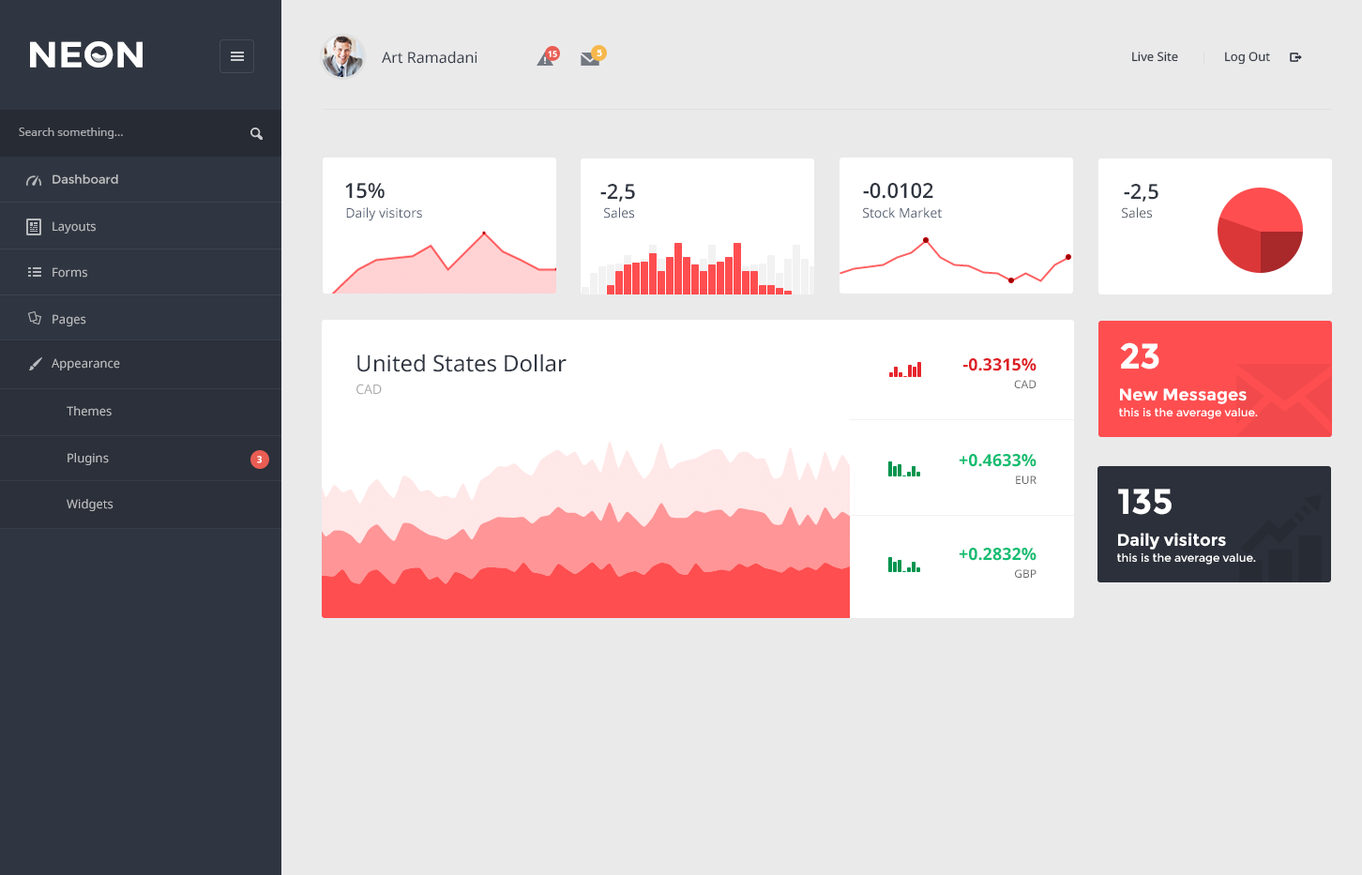
<style>
.page{position:relative;width:1362px;height:875px;background:#eaeaeb}
.page>*{position:absolute;margin:0}
.t1{font:36.4px "Montserrat-Bold";color:#ffffff;scale:1.06 1}
.t2{font:15px "NotoSans";color:#373e4a}
.t3{font:8.4px "NotoSans-Bold";color:#ffffff}
.t4{font:9.4px "NotoSans-Bold";color:#ffffff}
.t5{font:12.2px "NotoSans";color:#303641}
.t6{font:11.3px "NotoSans";color:#aaabae}
.t7{font:12.2px "Montserrat-Regular";color:#bec0c2}
.t8{font:20.6px "OpenSans-Semibold";color:#303641}
.t9{font:13.1px "OpenSans";color:#525d71}
.t10{font:13.1px "OpenSans";color:#595f69}
.t11{font:12.2px "NotoSans";color:#bec0c2}
.t12{font:22.5px/22.5px "NotoSans";color:#303641}
.t13{font:13.1px/22.5px "NotoSans";color:#aaaaaa}
.t14{font:11.3px/15.9px "Montserrat-Regular";color:#ffffff}
.t15{font:35.7px/15.9px "Montserrat-Bold";color:#ffffff}
.t16{font:16.9px/15.9px "Montserrat-Bold";color:#ffffff}
.t17{font:12.2px "NotoSans";color:#bebec0}
.t18{font:16.9px/17.8px "NotoSans-Bold";color:#dd1f26}
.t19{font:11.3px/17.8px "NotoSans";color:#666666}
.t20{font:16.9px/17.8px "NotoSans-Bold";color:#0fbd71}
</style>
<div class="page">
<p class="t1" style="left:30px;top:41px;width:113px;height:27px">NEON</p>
<p class="t2" style="left:382px;top:51px;width:96px;height:13px">Art Ramadani</p>
<p class="t3" style="left:548px;top:51px;width:9px;height:6px">15</p>
<p class="t4" style="left:597px;top:50px;width:5px;height:6px">5</p>
<p class="t5" style="left:1132px;top:52px;width:46px;height:10px">Live Site</p>
<p class="t5" style="left:1225px;top:52px;width:45px;height:13px">Log Out</p>
<p class="t6" style="left:19px;top:128px;width:104px;height:11px">Search something...</p>
<p class="t7" style="left:53px;top:175px;width:65px;height:9px">Dashboard</p>
<p class="t8" style="left:345px;top:183px;width:40px;height:16px">15%</p>
<p class="t8" style="left:600px;top:184px;width:35px;height:18px">-2,5</p>
<p class="t8" style="left:863px;top:183px;width:71px;height:16px">-0.0102</p>
<p class="t8" style="left:1124px;top:184px;width:35px;height:18px">-2,5</p>
<p class="t9" style="left:346px;top:207px;width:76px;height:14px">Daily visitors</p>
<p class="t9" style="left:604px;top:207px;width:30px;height:12px">Sales</p>
<p class="t9" style="left:863px;top:207px;width:79px;height:12px">Stock Market</p>
<p class="t10" style="left:1122px;top:207px;width:30px;height:12px">Sales</p>
<p class="t11" style="left:53px;top:221px;width:43px;height:13px">Layouts</p>
<p class="t11" style="left:53px;top:267px;width:34px;height:11px">Forms</p>
<p class="t11" style="left:53px;top:314px;width:33px;height:12px">Pages</p>
<p class="t12" style="left:357px;top:354px;width:210px;height:41px">United States Dollar<br><span class="t13">CAD</span></p>
<p class="t14" style="left:1119px;top:342px;width:139px;height:77px"><span class="t15">23<br><br></span><span class="t16">New Messages<br></span>this is the average value.</p>
<p class="t17" style="left:52px;top:358px;width:68px;height:13px">Appearance</p>
<p class="t18" style="left:964px;top:358px;width:73px;height:30px;text-align:right">-0.3315%<br><span class="t19">CAD</span></p>
<p class="t17" style="left:67px;top:406px;width:45px;height:11px">Themes</p>
<p class="t17" style="left:68px;top:453px;width:41px;height:12px">Plugins</p>
<p class="t4" style="left:257px;top:456px;width:5px;height:7px">3</p>
<p class="t20" style="left:959px;top:454px;width:78px;height:30px;text-align:right">+0.4633%<br><span class="t19">EUR</span></p>
<p class="t14" style="left:1117px;top:489px;width:139px;height:76px"><span class="t15">135<br><br></span><span class="t16">Daily visitors<br></span>this is the average value.</p>
<p class="t17" style="left:67px;top:499px;width:47px;height:12px">Widgets</p>
<p class="t20" style="left:959px;top:548px;width:78px;height:30px;text-align:right">+0.2832%<br><span class="t19">GBP</span></p>
</div>
